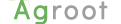
<style>
.page{position:relative;width:121px;height:24px;background:#ffffff}
.page>*{position:absolute;margin:0}
.t1{font:27px "DidactGothic-Regular";letter-spacing:0.1em;color:#9da0a1;font-weight:bold}
.t2{font:27px "DidactGothic-Regular";letter-spacing:0.1em;color:#6bb05b;font-weight:bold}
</style>
<div class="page">
<p class="t1" style="left:14px;top:0px;width:94px;height:25px"><span class="t2">Ag</span>root</p>
</div>
